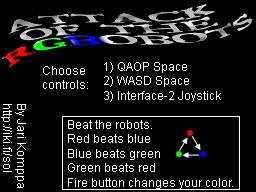
<style>
.page{position:relative;width:256px;height:192px;background:#000000}
.page>*{position:absolute;margin:0}
.t1{font:12.1px "Bedbug";scale:2.7 1}
.t2{font:12px "ArialMT";color:#ffffff}
</style>
<div class="page">
<p class="t1" style="left:2px;top:4px;width:251px;height:64px;text-align:center;rotate:-11deg">Attack<br>of the<br>RGBobots</p>
<p class="t2" style="left:104px;top:62px;width:117px;height:40px">1) QAOP Space<br>2) WASD Space<br>3) Interface-2 Joystick</p>
<p class="t2" style="left:43px;top:66px;width:45px;height:23px">Choose<br>controls:</p>
<p class="t2" style="left:68px;top:120px;width:165px;height:69px">Beat the robots.<br>Red beats blue<br>Blue beats green<br>Green beats red<br>Fire button changes your color.</p>
</div>
